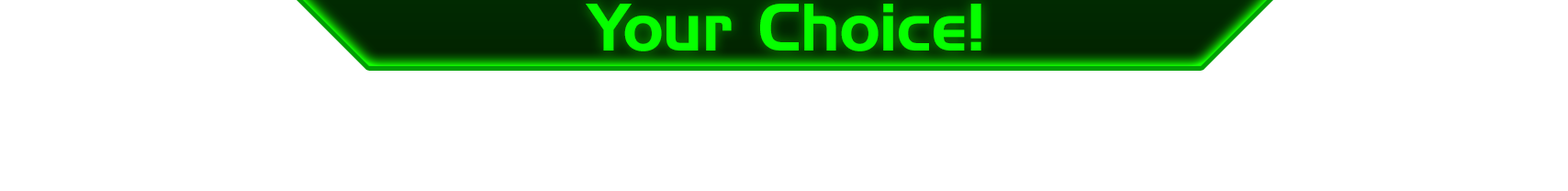
<style>
.page{position:relative;width:1568px;height:191px;background:#ffffff}
.page>*{position:absolute;margin:0}
.t1{font:65.3px "HandelGothicBT-Regular";color:#06ff00}
</style>
<div class="page">
<p class="t1" style="left:586px;top:4px;width:395px;height:47px">Your Choice!</p>
</div>
